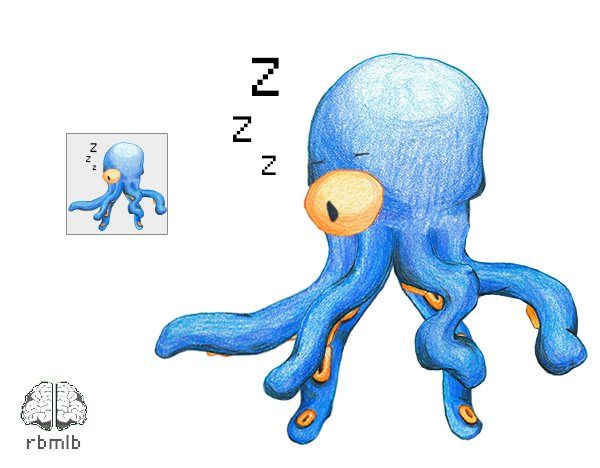
<style>
.page{position:relative;width:600px;height:468px;background:#ffffff}
.page>*{position:absolute;margin:0}
.t1{font:71px "Pixelade";letter-spacing:0.04em;color:#000000}
.t2{font:48px "Pixelade";letter-spacing:0.04em;color:#000000}
.t3{font:16px "Pixelade";letter-spacing:0.04em;color:#000000}
.t4{font:10.8px "Pixelade";letter-spacing:0.04em}
.t5{font:36px "Pixelade";letter-spacing:0.04em;color:#000000}
.t6{font:8.1px "Pixelade";letter-spacing:0.04em}
.t7{font:26px "Pixelade";letter-spacing:0.04em;color:#585858}
</style>
<div class="page">
<p class="t1" style="left:252px;top:57px;width:27px;height:39px">Z</p>
<p class="t2" style="left:233px;top:116px;width:19px;height:26px">Z</p>
<p class="t3" style="left:90px;top:143px;width:7px;height:10px">Z</p>
<p class="t4" style="left:86px;top:156px;width:5px;height:7px">Z</p>
<p class="t5" style="left:262px;top:155px;width:14px;height:20px">Z</p>
<p class="t6" style="left:92px;top:165px;width:5px;height:6px">Z</p>
<p class="t7" style="left:26px;top:434px;width:55px;height:16px">rbmlb</p>
</div>
